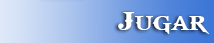
<style>
.page{position:relative;width:214px;height:43px}
.page>*{position:absolute;margin:0}
.t1{font:28px "GodOfWar";color:#ffffff}
</style>
<div class="page">
<p class="t1" style="left:118px;top:12px;width:92px;height:22px">Jugar</p>
</div>
